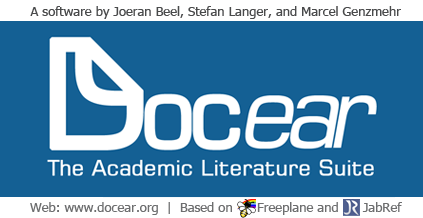
<style>
.page{position:relative;width:423px;height:218px;background:#146094}
.page>*{position:absolute;margin:0}
.t1{font:13px "Tahoma";color:#494a4b}
.t2{font:13px "Tahoma";color:#6d6e6f}
</style>
<div class="page">
<p class="t1" style="left:30px;top:6px;width:371px;height:13px">A software by Joeran Beel, Stefan Langer, and Marcel Genzmehr</p>
<p class="t2" style="left:30px;top:202px;width:372px;height:13px">Web: www.docear.org  |  Based on      Freeplane and      JabRef</p>
</div>
